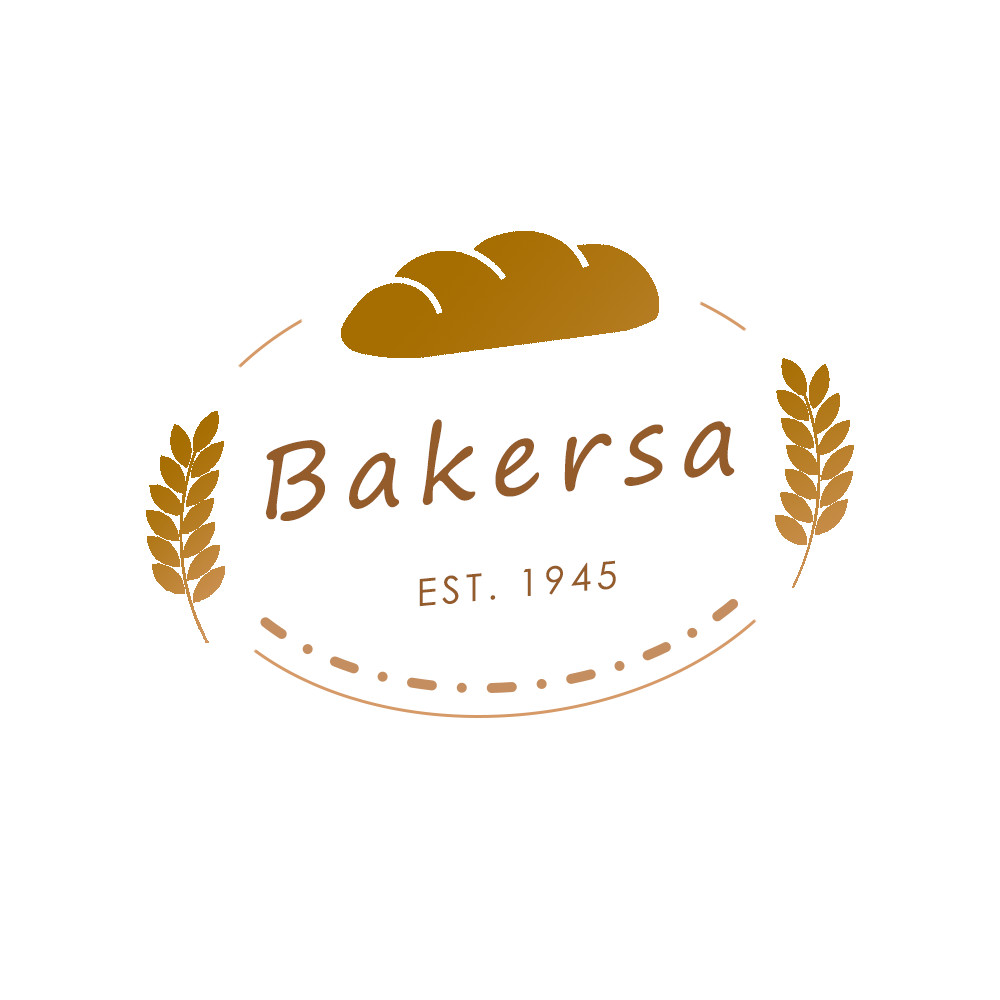
<style>
.page{position:relative;width:1000px;height:1000px;background:#ffffff}
.page>*{position:absolute;margin:0}
.t1{font:100px "SegoePrint";letter-spacing:0.14em;color:#945b2b}
.t2{font:37.5px "CenturyGothic";letter-spacing:0.14em;color:#945b2b}
</style>
<div class="page">
<p class="t1" style="left:266px;top:419px;width:469px;height:102px;rotate:-5deg">Bakersa</p>
<p class="t2" style="left:419px;top:560px;width:197px;height:47px;rotate:-5deg">EST. 1945</p>
</div>
